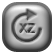
<style>
.page{position:relative;width:55px;height:55px;background:#ffffff}
.page>*{position:absolute;margin:0}
.t1{font:12px "ArialMT"}
</style>
<div class="page">
<p class="t1" style="left:20px;top:24px;width:15px;height:9px">XZ</p>
</div>
